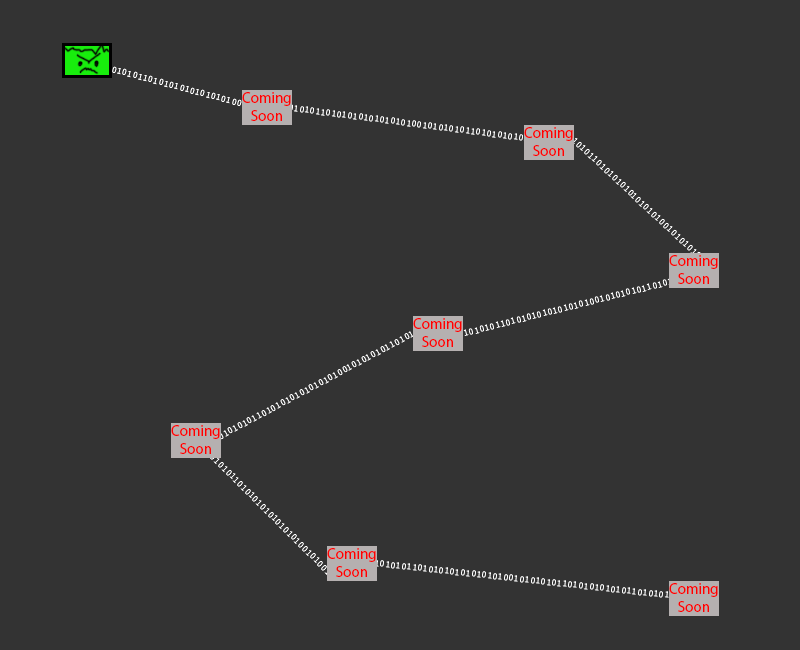
<style>
.page{position:relative;width:800px;height:650px;background:#333333}
.page>*{position:absolute;margin:0}
.t1{font:8.8px "OratorStd";color:#ffffff}
.t2{font:8.8px "OratorStd";color:#ff0000}
</style>
<div class="page">
<p class="t1" style="left:101px;top:63px;width:145px;height:45px;rotate:15deg">0101010110101010101010101001</p>
<p class="t1" style="left:278px;top:103px;width:250px;height:39px;rotate:7deg">01010101101010101010101010010101010110101010101<span class="t2">010101001</span></p>
<p class="t1" style="left:561px;top:126px;width:147px;height:140px;rotate:43deg">0101010110101010101010101001010101011</p>
<p class="t1" style="left:458px;top:278px;width:215px;height:59px;rotate:-14deg">01010101101010101010101010010101010110101<span class="t2">010101010101001</span></p>
<p class="t1" style="left:218px;top:331px;width:196px;height:109px;rotate:-28deg">01010101101010101010101010010101010110101<span class="t2">010101010101001</span></p>
<p class="t1" style="left:203px;top:447px;width:128px;height:129px;rotate:45deg">010101011010101010101010100101001</p>
<p class="t1" style="left:370px;top:559px;width:315px;height:41px;rotate:6deg"><span class="t2">0</span>1010101101010101010101010010101010110101010101011010101010<span class="t2">10101010010101010110101010101010101001</span></p>
</div>
